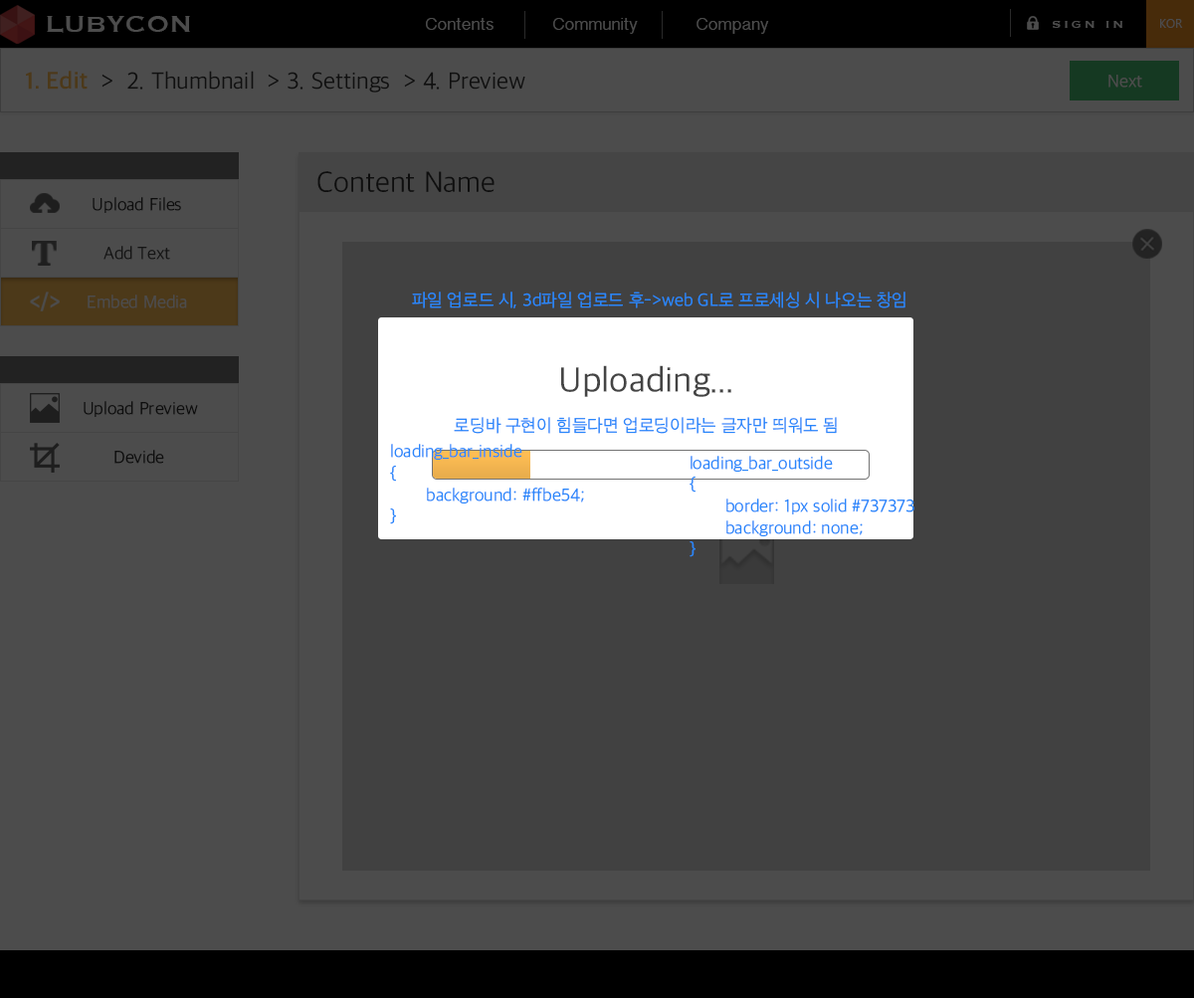
<style>
.page{position:relative;width:1194px;height:999px;background:#4c4c4c}
.page>*{position:absolute;margin:0}
.t1{font:29.8px "Copperplate";color:#4c4c4c}
.t2{font:17.9px "TamilSangamMN";color:#4c4c4c}
.t3{font:13.9px "Copperplate";letter-spacing:0.2em;color:#4c4c4c}
.t4{font:11.9px "LaoUI";color:#4c4c4c}
.t5{font:23.9px "AppleSDGothicNeo-Light";color:#101010}
.t6{font:23.9px "AppleSDGothicNeo-Bold";color:#101010}
.t7{font:17.9px "AppleSDGothicNeo-Light";color:#4c4c4c}
.t8{font:29.8px "AppleSDGothicNeo-Light";color:#0e0e0e}
.t9{font:17.9px "AppleSDGothicNeo-Light";color:#0e0e0e}
.t10{font:17.9px "AppleSDGothicNeo-Light";color:#151515}
.t11{font:17.9px "AppleSDGothicNeo-Light";color:#2987fb}
.t12{font:35.8px "AppleSDGothicNeo-Regular";color:#444444}
</style>
<div class="page">
<p class="t1" style="left:47px;top:16px;width:143px;height:17px">LUBYCON</p>
<p class="t2" style="left:426px;top:18px;width:67px;height:12px">Contents</p>
<p class="t2" style="left:553px;top:18px;width:85px;height:16px">Community</p>
<p class="t2" style="left:696px;top:18px;width:73px;height:16px">Company</p>
<p class="t3" style="left:1053px;top:21px;width:69px;height:7px">SIGN IN</p>
<p class="t4" style="left:1160px;top:19px;width:23px;height:9px">KOR</p>
<p class="t5" style="left:26px;top:71px;width:499px;height:22px"><span class="t6">1. Edit</span>  &gt;  2. Thumbnail  &gt; 3. Settings  &gt; 4. Preview</p>
<p class="t7" style="left:1108px;top:75px;width:34px;height:13px">Next</p>
<p class="t8" style="left:317px;top:171px;width:177px;height:21px">Content Name</p>
<p class="t9" style="left:93px;top:197px;width:88px;height:16px">Upload Files</p>
<p class="t10" style="left:103px;top:246px;width:67px;height:14px">Add Text</p>
<p class="t11" style="left:412px;top:291px;width:493px;height:17px">파일 업로드 시, 3d파일 업로드 후-&gt;web GL로 프로세싱 시 나오는 창임</p>
<p class="t7" style="left:88px;top:294px;width:99px;height:14px">Embed Media</p>
<p class="t12" style="left:561px;top:365px;width:170px;height:32px">Uploading...</p>
<p class="t9" style="left:84px;top:401px;width:114px;height:16px">Upload Preview</p>
<p class="t11" style="left:454px;top:417px;width:383px;height:17px">로딩바 구현이 힘들다면 업로딩이라는 글자만 띄워도 됨</p>
<p class="t9" style="left:114px;top:450px;width:50px;height:14px">Devide</p>
<p class="t11" style="left:390px;top:444px;width:194px;height:80px">loading_bar_inside<br>{<br> background: #ffbe54;<br>}</p>
<p class="t11" style="left:689px;top:456px;width:225px;height:101px">loading_bar_outside<br>{<br> border: 1px solid #737373<br> background: none;<br>}</p>
</div>
